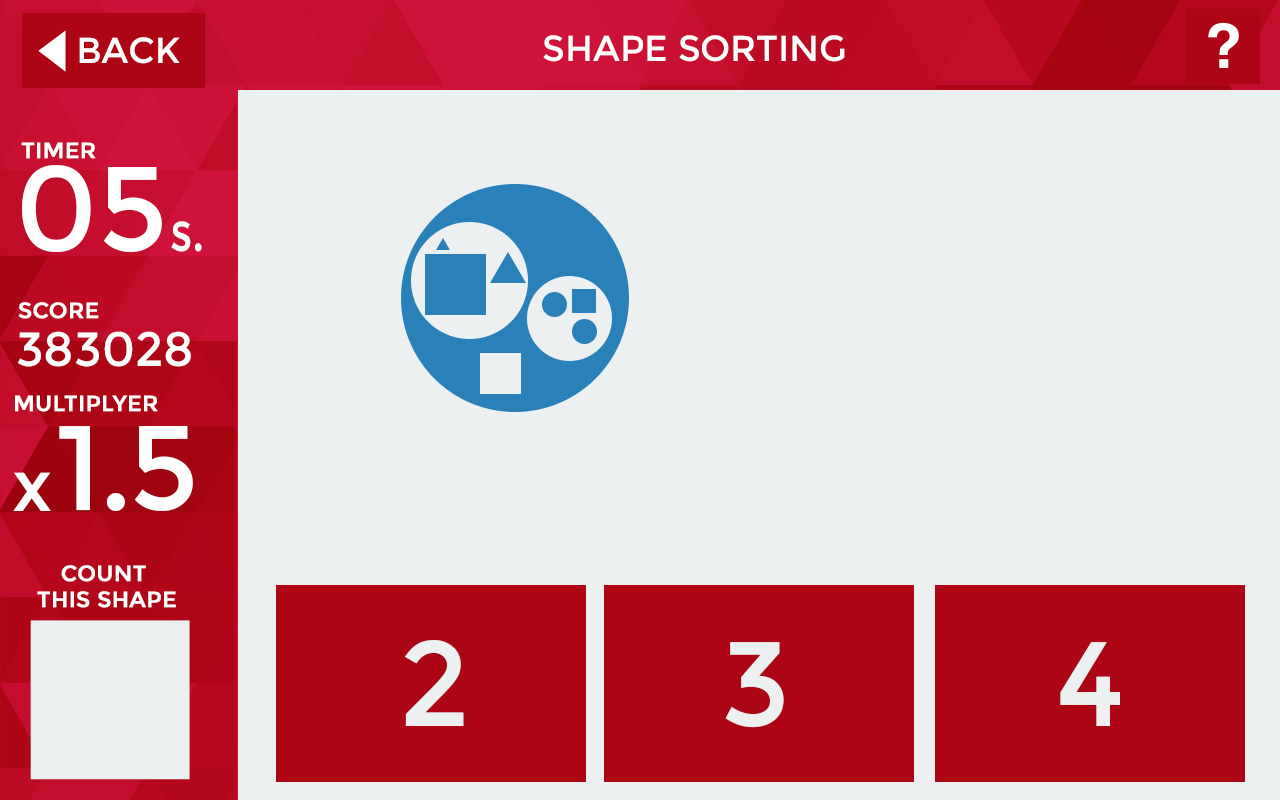
<style>
.page{position:relative;width:1280px;height:800px;background:#ecf0f1}
.page>*{position:absolute;margin:0}
.t1{font:36px "Montserrat-Regular";color:#ffffff}
.t2{font:36px "Montserrat-Regular";color:#ffffff;text-transform:uppercase}
.t3{font:22px "Montserrat-Regular";color:#ffffff;font-weight:bold}
.t4{font:120px "Montserrat-Regular";color:#ffffff}
.t5{font:55px "Montserrat-Regular";color:#ffffff;scale:0.8 1}
.t6{font:48px "Montserrat-Regular";color:#ffffff}
.t7{font:120px "Montserrat-Regular";letter-spacing:-0.025em;color:#ffffff}
.t8{font:72px "Montserrat-Regular";color:#ffffff}
.t9{font:22px "Montserrat-Regular";color:#ffffff;text-transform:uppercase;font-weight:bold}
.t10{font:120px "Montserrat-Regular";color:#ecf0f1}
</style>
<div class="page">
<p class="t1" style="left:79px;top:37px;width:101px;height:27px">BACK</p>
<p class="t2" style="left:543px;top:35px;width:302px;height:27px">Shape Sorting</p>
<p class="t3" style="left:21px;top:142px;width:75px;height:17px">TIMER</p>
<p class="t4" style="left:22px;top:165px;width:140px;height:87px">05</p>
<p class="t5" style="left:171px;top:221px;width:31px;height:31px">s.</p>
<p class="t3" style="left:18px;top:302px;width:81px;height:17px">SCORE</p>
<p class="t6" style="left:17px;top:331px;width:174px;height:36px">383028</p>
<p class="t3" style="left:15px;top:395px;width:143px;height:17px">MULTIPLYER</p>
<p class="t7" style="left:59px;top:426px;width:134px;height:85px">1.5</p>
<p class="t8" style="left:13px;top:472px;width:38px;height:39px">x</p>
<p class="t9" style="left:37px;top:565px;width:139px;height:43px;text-align:center">count <br>this shape</p>
<p class="t10" style="left:405px;top:640px;width:59px;height:86px">2</p>
<p class="t10" style="left:725px;top:642px;width:59px;height:86px">3</p>
<p class="t10" style="left:1060px;top:642px;width:60px;height:84px">4</p>
</div>
